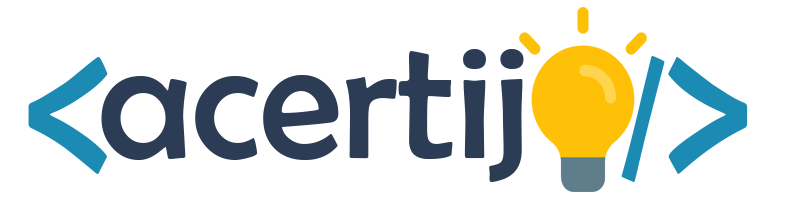
<style>
.page{position:relative;width:800px;height:200px;background:#ffffff}
.page>*{position:absolute;margin:0}
.t1{font:169.3px "BerlinSansFB-Reg";color:#2b3c54}
.t2{font:254px "BerlinSansFB-Reg";color:#1c8cb4}
.t3{font:169.3px "BerlinSansFB-Reg";color:#1c8cb4}
</style>
<div class="page">
<p class="t1" style="left:101px;top:49px;width:423px;height:133px">acertij</p>
<p class="t2" style="left:28px;top:56px;width:720px;height:118px">&lt;         &gt;</p>
<p class="t3" style="left:621px;top:56px;width:44px;height:126px">/</p>
</div>
